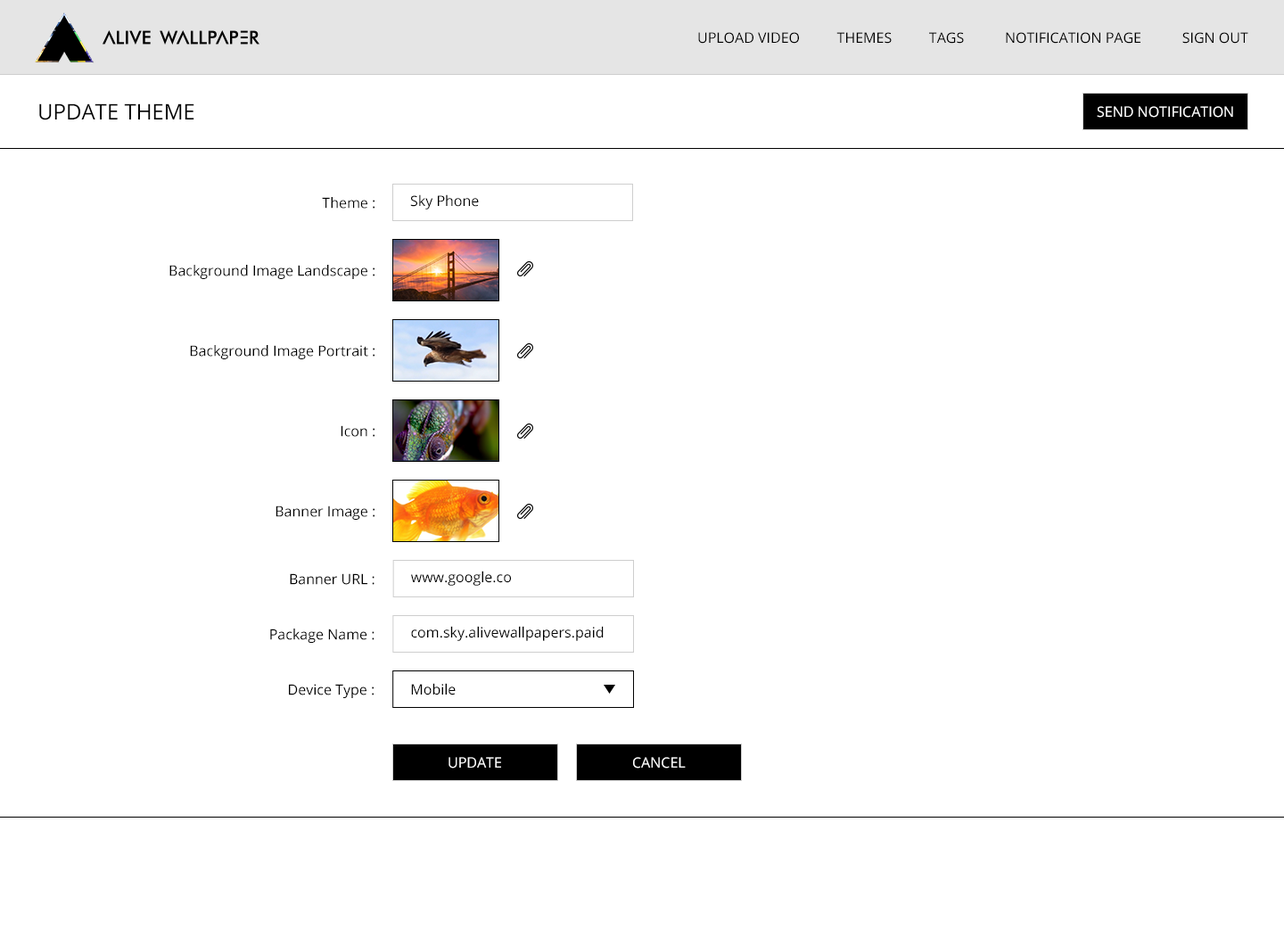
<style>
.page{position:relative;width:1284px;height:929px;background:#ffffff}
.page>*{position:absolute;margin:0}
.t1{font:14.3px "OpenSans";color:#000000;text-transform:uppercase}
.t2{font:21.4px "OpenSans";color:#000000;text-transform:uppercase}
.t3{font:14.3px "OpenSans";color:#ffffff;text-transform:uppercase}
.t4{font:14.3px "OpenSans";color:#000000}
</style>
<div class="page">
<p class="t1" style="left:698px;top:32px;width:550px;height:12px">UPLoAD VIDEO          Themes          TAGS           Notification Page           Sign Out</p>
<p class="t2" style="left:39px;top:103px;width:155px;height:17px">Update Theme</p>
<p class="t3" style="left:1096px;top:106px;width:137px;height:12px">Send notification</p>
<p class="t4" style="left:322px;top:197px;width:52px;height:12px">Theme :</p>
<p class="t4" style="left:410px;top:194px;width:69px;height:15px">Sky Phone</p>
<p class="t4" style="left:169px;top:265px;width:205px;height:14px">Background Image Landscape :</p>
<p class="t4" style="left:190px;top:345px;width:184px;height:14px">Background Image Portrait :</p>
<p class="t4" style="left:341px;top:425px;width:33px;height:12px">Icon :</p>
<p class="t4" style="left:275px;top:505px;width:99px;height:15px">Banner Image :</p>
<p class="t4" style="left:290px;top:573px;width:84px;height:12px">Banner URL :</p>
<p class="t4" style="left:411px;top:571px;width:100px;height:15px">www.google.co</p>
<p class="t4" style="left:270px;top:628px;width:104px;height:15px">Package Name :</p>
<p class="t4" style="left:411px;top:626px;width:193px;height:15px">com.sky.alivewallpapers.paid</p>
<p class="t4" style="left:289px;top:684px;width:85px;height:14px">Device Type :</p>
<p class="t4" style="left:411px;top:683px;width:45px;height:12px">Mobile</p>
<p class="t3" style="left:448px;top:757px;width:53px;height:11px">UPDATE</p>
<p class="t3" style="left:633px;top:757px;width:53px;height:11px">CANCEL</p>
</div>
